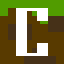
<style>
.page{position:relative;width:64px;height:64px;background:#583a00}
.page>*{position:absolute;margin:0}
.t1{font:71px "Pixeloza03";color:#ffffff;scale:3.29 1}
</style>
<div class="page">
<p class="t1" style="left:16px;top:8px;width:32px;height:48px">c</p>
</div>
